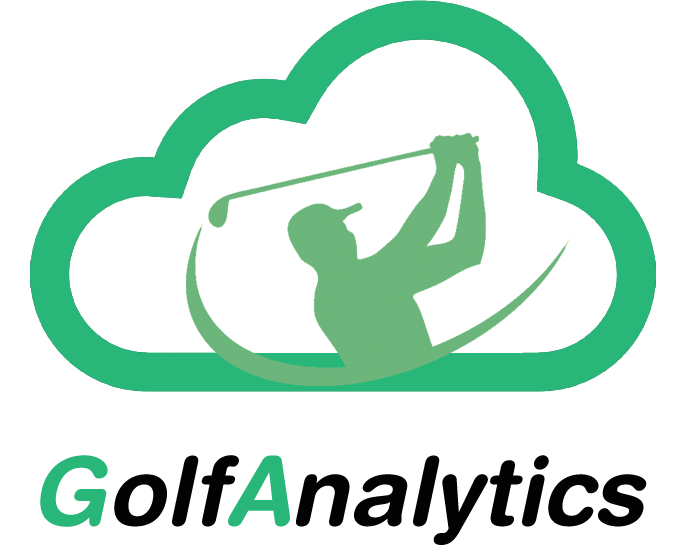
<style>
.page{position:relative;width:688px;height:550px;background:#ffffff}
.page>*{position:absolute;margin:0}
.t1{font:95px "HelveticaRoundedLTStd-BdO";color:#020202}
.t2{font:95px "HelveticaRoundedLTStd-BdO";color:#28b779}
</style>
<div class="page">
<p class="t1" style="left:40px;top:455px;width:607px;height:90px"><span class="t2">G</span>olf<span class="t2">A</span>nalytics</p>
</div>
